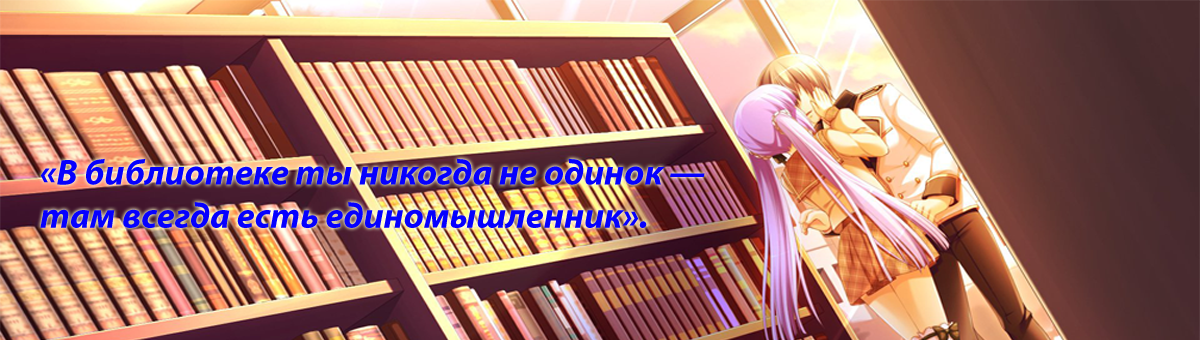
<style>
.page{position:relative;width:1200px;height:340px}
.page>*{position:absolute;margin:0}
.t1{font:36px "MyriadPro-BoldIt";color:#0600ff}
</style>
<div class="page">
<p class="t1" style="left:40px;top:158px;width:665px;height:70px">«В библиотеке ты никогда не одинок — <br>там всегда есть единомышленник».</p>
</div>
